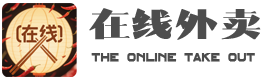
<style>
.page{position:relative;width:262px;height:80px;background:#ffffff}
.page>*{position:absolute;margin:0}
.t1{font:43.3px "MFGeFengNoncommercial-Regular";letter-spacing:-0.019em;color:#4d4d4d;font-weight:bold}
.t2{font:11px "Alfphabet-IV";letter-spacing:-0.019em;color:#4c4c4c;font-weight:bold}
</style>
<div class="page">
<p class="t1" style="left:89px;top:8px;width:172px;height:32px">在线外卖</p>
<p class="t2" style="left:91px;top:53px;width:164px;height:9px">The ONLINE TAKE OUT</p>
</div>
